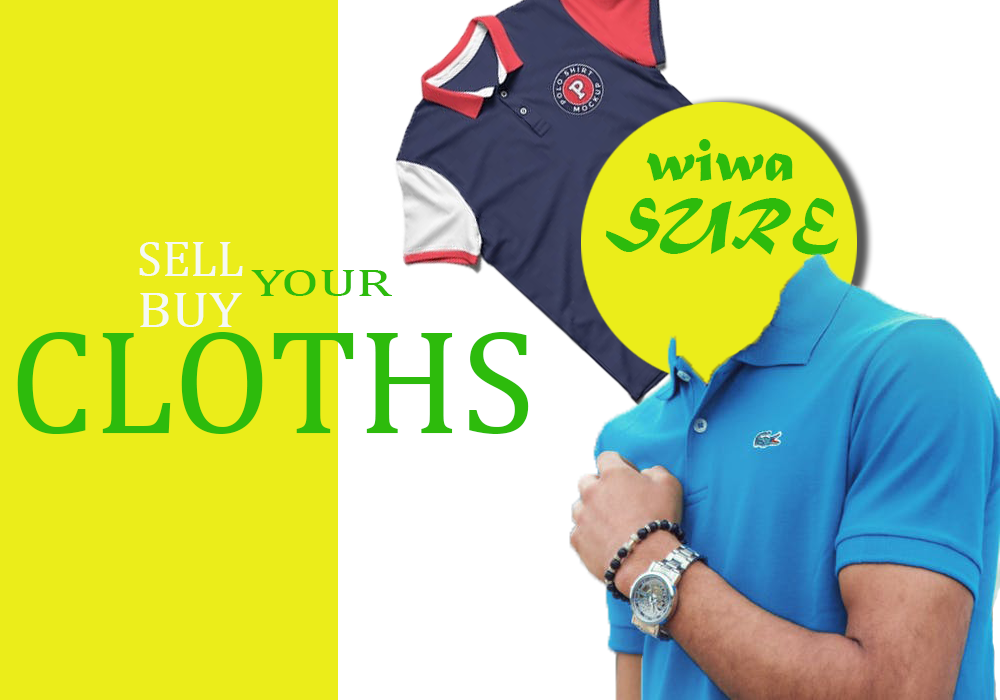
<style>
.page{position:relative;width:1000px;height:700px;background:#ebed1a}
.page>*{position:absolute;margin:0}
.t1{font:62.5px "MaturaMTScriptCapitals";color:#2dbb0c}
.t2{font:50px "Cambria";color:#f5f9f4}
.t3{font:37.6px "Cambria";color:#2dbb0c;scale:1.54 1}
.t4{font:50.1px "Cambria";color:#f5f9f4;scale:1.14 1}
.t5{font:150px "Cambria";color:#2dbb0c}
</style>
<div class="page">
<p class="t1" style="left:646px;top:139px;width:147px;height:42px">wiwa</p>
<p class="t1" style="left:606px;top:198px;width:233px;height:57px">SURE</p>
<p class="t2" style="left:139px;top:242px;width:104px;height:34px">SELL</p>
<p class="t3" style="left:251px;top:270px;width:141px;height:26px">YOUR</p>
<p class="t4" style="left:140px;top:293px;width:102px;height:34px">BUY</p>
<p class="t5" style="left:17px;top:332px;width:512px;height:102px">CLOTHS</p>
</div>
